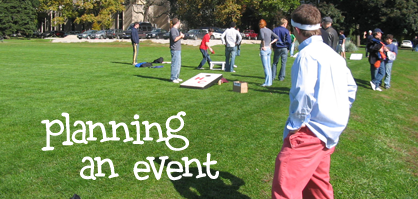
<style>
.page{position:relative;width:418px;height:199px}
.page>*{position:absolute;margin:0}
.t1{font:48px "Blackboysonmopeds";color:#ffffff}
</style>
<div class="page">
<p class="t1" style="left:41px;top:111px;width:148px;height:40px">planning</p>
<p class="t1" style="left:80px;top:153px;width:139px;height:28px">an event</p>
</div>
